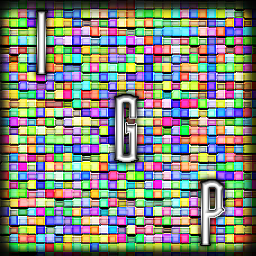
<style>
.page{position:relative;width:256px;height:256px}
.page>*{position:absolute;margin:0}
.t1{font:92px "Steamwreck"}
</style>
<div class="page">
<p class="t1" style="left:37px;top:11px;width:10px;height:63px">I</p>
<p class="t1" style="left:115px;top:95px;width:23px;height:67px">G</p>
<p class="t1" style="left:201px;top:180px;width:23px;height:65px">P</p>
</div>
